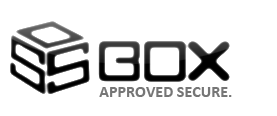
<style>
.page{position:relative;width:277px;height:116px;background:#ffffff}
.page>*{position:absolute;margin:0}
.t1{font:16px "Calibri-Bold";color:#767676}
</style>
<div class="page">
<p class="t1" style="left:99px;top:87px;width:133px;height:10px">APPROVED SECURE.</p>
</div>
